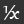
<style>
.page{position:relative;width:24px;height:24px;background:#333333}
.page>*{position:absolute;margin:0}
.t1{font:24px "Gabriola";color:#ffffff}
</style>
<div class="page">
<p class="t1" style="left:3px;top:5px;width:17px;height:15px">1/x</p>
</div>
